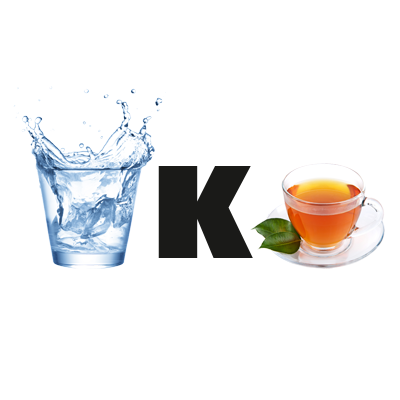
<style>
.page{position:relative;width:400px;height:400px;background:#ffffff}
.page>*{position:absolute;margin:0}
.t1{font:117.4px "Impact";color:#1a1a18;scale:1.6 1}
</style>
<div class="page">
<p class="t1" style="left:158px;top:166px;width:95px;height:92px">K</p>
</div>
